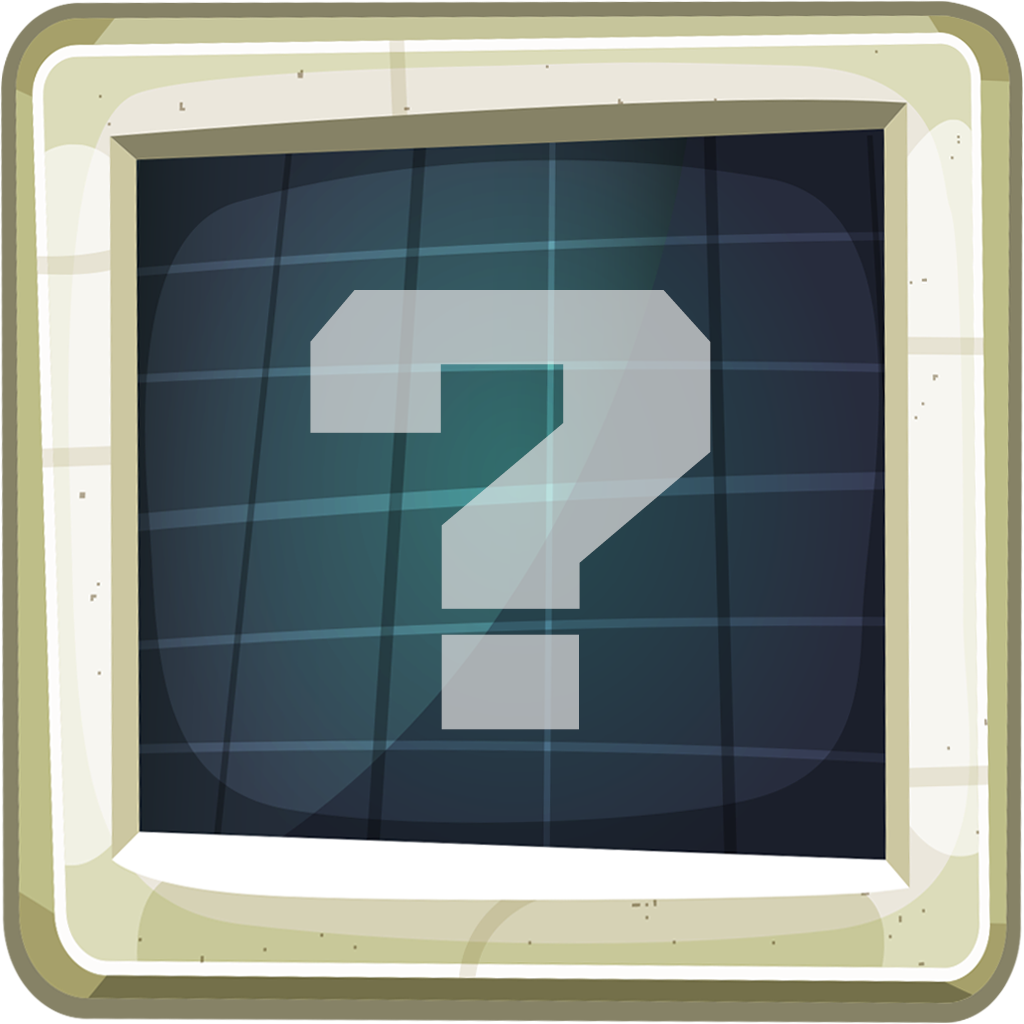
<style>
.page{position:relative;width:1024px;height:1024px}
.page>*{position:absolute;margin:0}
.t1{font:640px "MFBanHei_Noncommercial-Regular";color:#adb7ba}
</style>
<div class="page">
<p class="t1" style="left:310px;top:290px;width:401px;height:440px">？</p>
</div>
